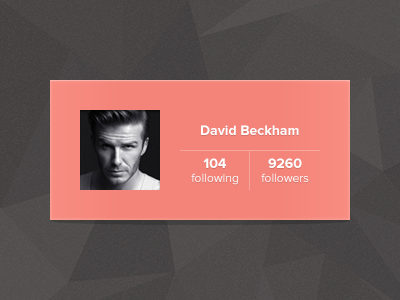
<style>
.page{position:relative;width:400px;height:300px}
.page>*{position:absolute;margin:0}
.t1{font:14px "ProximaNova-Bold";color:#ffffff}
.t2{font:12px "ProximaNova-Regular";color:#ffffff}
</style>
<div class="page">
<p class="t1" style="left:201px;top:125px;width:98px;height:10px">David Beckham</p>
<p class="t2" style="left:191px;top:158px;width:47px;height:27px;text-align:center"><span class="t1">104<br></span>following</p>
<p class="t2" style="left:261px;top:158px;width:48px;height:24px;text-align:center"><span class="t1">9260<br></span>followers</p>
</div>
